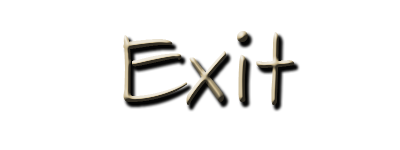
<style>
.page{position:relative;width:400px;height:150px;background:#ffffff}
.page>*{position:absolute;margin:0}
.t1{font:100px "SketchFlowPrint"}
</style>
<div class="page">
<p class="t1" style="left:123px;top:31px;width:172px;height:74px">Exit</p>
</div>
